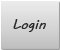
<style>
.page{position:relative;width:60px;height:50px}
.page>*{position:absolute;margin:0}
.t1{font:14px "MVBoli";color:#292929}
</style>
<div class="page">
<p class="t1" style="left:13px;top:19px;width:33px;height:13px">Login</p>
</div>
